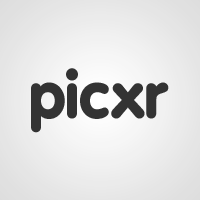
<style>
.page{position:relative;width:200px;height:200px}
.page>*{position:absolute;margin:0}
.t1{font:64px "VAGRoundedBlackSSiBlack";letter-spacing:-0.01em;color:#333333}
.t2{font:64px "VAGRoundedBlackSSiBlack";letter-spacing:0.05em;color:#333333}
.t3{font:64px "VAGRoundedBlackSSiBlack";letter-spacing:0.005em;color:#333333}
.t4{font:64px "VAGRoundedBlackSSiBlack";letter-spacing:-0.025em;color:#333333}
</style>
<div class="page">
<p class="t1" style="left:31px;top:68px;width:138px;height:65px">pi<span class="t2">c</span><span class="t3">x</span><span class="t4">r</span></p>
</div>
